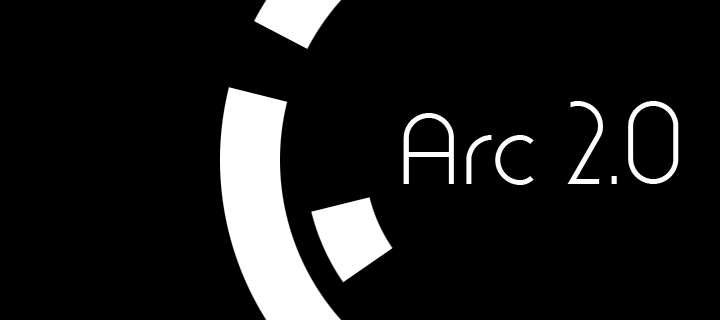
<style>
.page{position:relative;width:720px;height:320px;background:#000000}
.page>*{position:absolute;margin:0}
.t1{font:96px "TimeBurner";color:#ffffff}
</style>
<div class="page">
<p class="t1" style="left:403px;top:101px;width:276px;height:84px">Arc 2.0</p>
</div>
